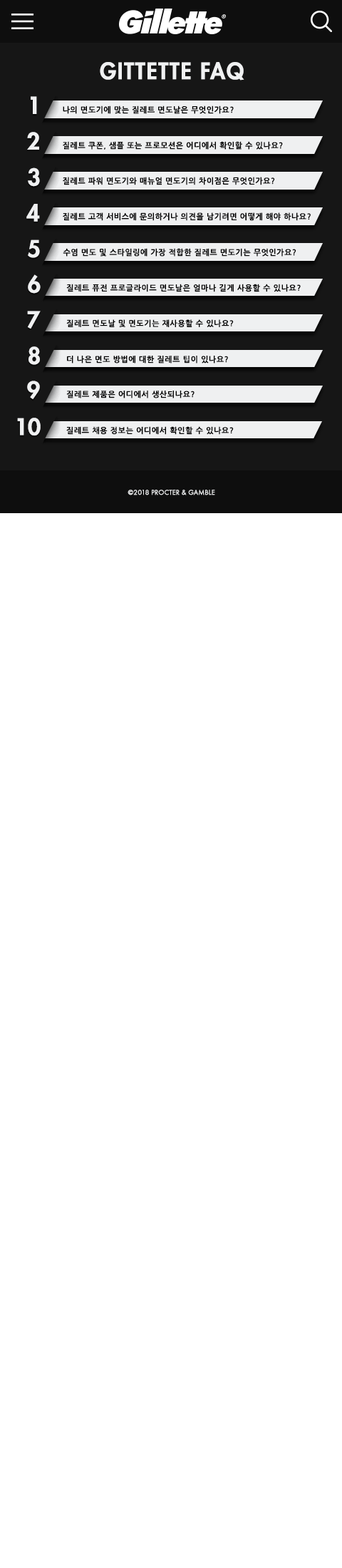
<style>
.page{position:relative;width:342px;height:1568px;background:#ffffff}
.page>*{position:absolute;margin:0}
.t1{font:22.3px "Futura-Heavy";letter-spacing:0.025em;color:#f0f1f2;font-weight:bold}
.t2{font:22.6px "Futura-Heavy";letter-spacing:0.025em;color:#f0f1f2;font-weight:bold}
.t3{font:7.8px "NanumGothicBold";letter-spacing:0.025em;color:#000000;font-weight:bold}
.t4{font:22.4px "Futura-Heavy";letter-spacing:0.025em;color:#f0f1f2;font-weight:bold}
.t5{font:7.7px "NanumGothicBold";letter-spacing:0.025em;color:#000000;font-weight:bold}
.t6{font:22.2px "Futura-Heavy";letter-spacing:-0.03em;color:#f0f1f2;font-weight:bold}
.t7{font:7.6px "NanumGothicBold";letter-spacing:0.025em;color:#000000;font-weight:bold}
.t8{font:7.1px "FuturaTEE-Book";color:#f0f1f2;font-weight:bold}
</style>
<div class="page">
<p class="t1" style="left:100px;top:62px;width:144px;height:19px">GITTETTE FAQ</p>
<p class="t2" style="left:31px;top:96px;width:6px;height:18px">1</p>
<p class="t3" style="left:63px;top:105px;width:171px;height:9px">나의 면도기에 맞는 질레트 면도날은 무엇인가요?</p>
<p class="t2" style="left:27px;top:132px;width:12px;height:18px">2</p>
<p class="t3" style="left:63px;top:141px;width:220px;height:9px">질레트 쿠폰, 샘플 또는 프로모션은 어디에서 확인할 수 있나요?</p>
<p class="t2" style="left:28px;top:167px;width:12px;height:20px">3</p>
<p class="t3" style="left:63px;top:177px;width:212px;height:8px">질레트 파워 면도기와 매뉴얼 면도기의 차이점은 무엇인가요?</p>
<p class="t2" style="left:26px;top:204px;width:14px;height:18px">4</p>
<p class="t3" style="left:63px;top:212px;width:248px;height:9px">질레트 고객 서비스에 문의하거나 의견을 남기려면 어떻게 해야 하나요?</p>
<p class="t2" style="left:28px;top:239px;width:12px;height:19px">5</p>
<p class="t3" style="left:63px;top:248px;width:233px;height:9px">수염 면도 및 스타일링에 가장 적합한 질레트 면도기는 무엇인가요?</p>
<p class="t4" style="left:28px;top:274px;width:13px;height:20px">6</p>
<p class="t5" style="left:66px;top:284px;width:235px;height:8px">질레트 퓨전 프로글라이드 면도날은 얼마나 길게 사용할 수 있나요?</p>
<p class="t4" style="left:27px;top:311px;width:14px;height:18px">7</p>
<p class="t5" style="left:66px;top:319px;width:168px;height:8px">질레트 면도날 및 면도기는 재사용할 수 있나요?</p>
<p class="t4" style="left:29px;top:346px;width:11px;height:19px">8</p>
<p class="t5" style="left:67px;top:356px;width:161px;height:7px">더 나은 면도 방법에 대한 질레트 팁이 있나요?</p>
<p class="t4" style="left:27px;top:381px;width:13px;height:18px">9</p>
<p class="t5" style="left:66px;top:391px;width:129px;height:7px">질레트 제품은 어디에서 생산되나요?</p>
<p class="t6" style="left:17px;top:418px;width:24px;height:18px">10</p>
<p class="t7" style="left:66px;top:426px;width:168px;height:9px">질레트 채용 정보는 어디에서 확인할 수 있나요?</p>
<p class="t8" style="left:128px;top:490px;width:87px;height:5px">©2018 PROCTER &amp; GAMBLE</p>
</div>
